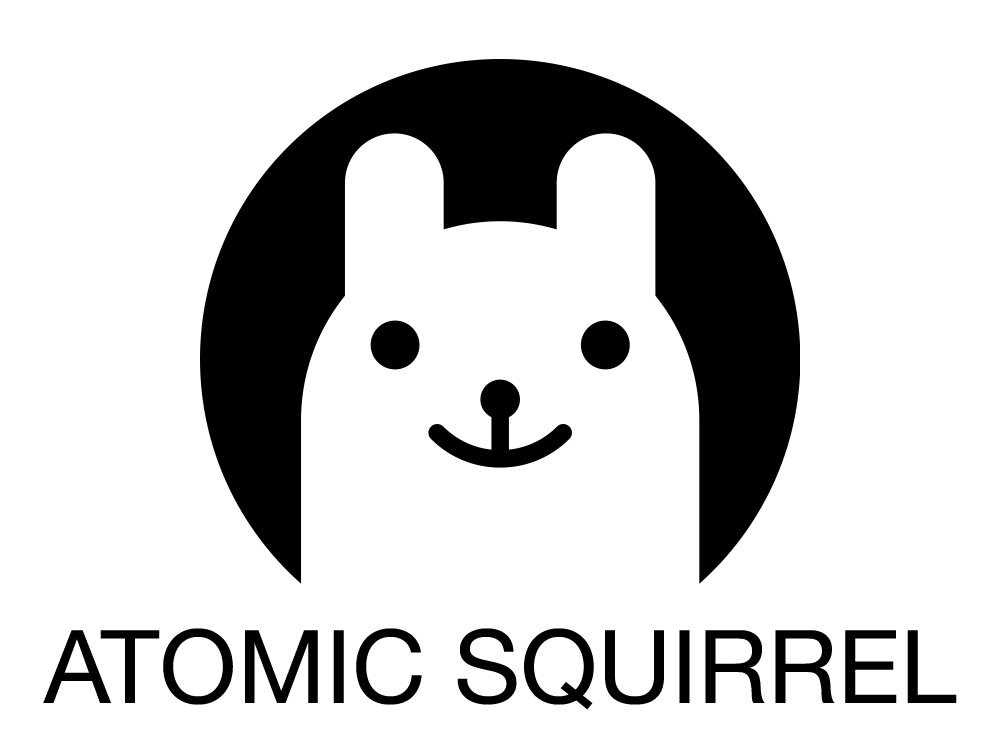
<style>
.page{position:relative;width:1000px;height:750px;background:#ffffff}
.page>*{position:absolute;margin:0}
.t1{font:102px "HelveticaNeue";color:#000000}
</style>
<div class="page">
<p class="t1" style="left:43px;top:628px;width:914px;height:82px">ATOMIC SQUIRREL</p>
</div>
